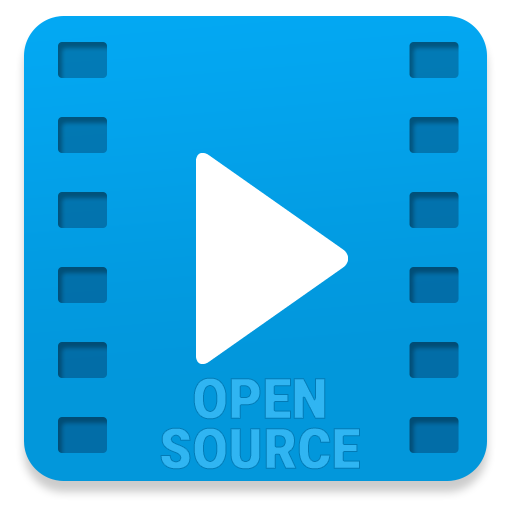
<style>
.page{position:relative;width:512px;height:512px}
.page>*{position:absolute;margin:0}
.t1{font:56px/50px "Roboto-Black";color:#30b5f2;text-transform:uppercase;font-weight:bold;scale:0.9 1}
</style>
<div class="page">
<p class="t1" style="left:160px;top:377px;width:200px;height:93px;text-align:center">OPEN<br>SOURCE</p>
</div>
